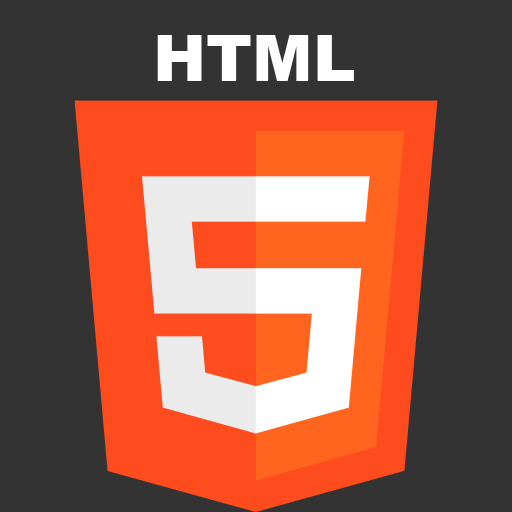
<style>
.page{position:relative;width:512px;height:512px;background:#333333}
.page>*{position:absolute;margin:0}
.t1{font:64px "Arial-Black";color:#ffffff}
</style>
<div class="page">
<p class="t1" style="left:157px;top:35px;width:197px;height:46px">HTML</p>
</div>
